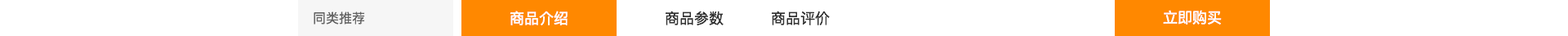
<style>
.page{position:relative;width:1568px;height:36px;background:#ffffff}
.page>*{position:absolute;margin:0}
.t1{font:13.1px "PingFangSC-Regular";color:#666666}
.t2{font:14.7px "PingFangSC-Regular";color:#ffffff}
.t3{font:14.7px "PingFangSC-Regular";color:#333333}
</style>
<div class="page">
<p class="t1" style="left:314px;top:11px;width:51px;height:13px">同类推荐</p>
<p class="t2" style="left:510px;top:11px;width:58px;height:14px">商品介绍</p>
<p class="t3" style="left:665px;top:11px;width:59px;height:14px">商品参数</p>
<p class="t3" style="left:771px;top:11px;width:59px;height:14px">商品评价</p>
<p class="t2" style="left:1163px;top:10px;width:59px;height:14px">立即购买</p>
</div>
